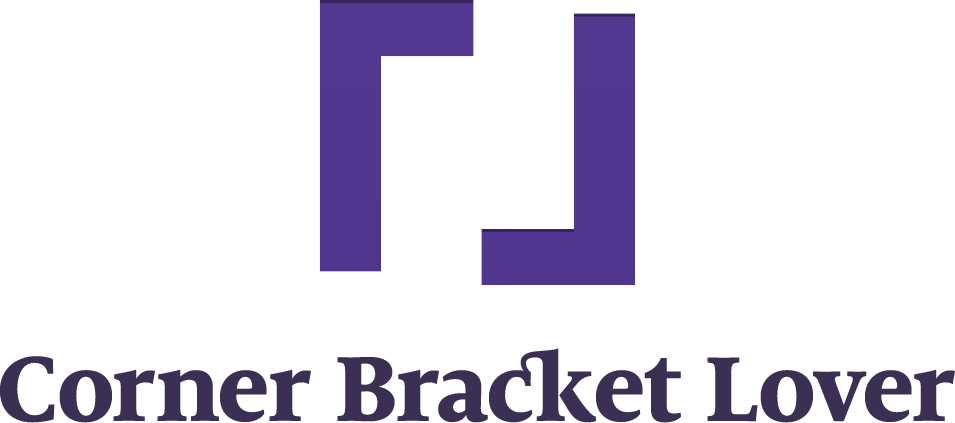
<style>
.page{position:relative;width:955px;height:423px;background:#ffffff}
.page>*{position:absolute;margin:0}
.t1{font:512.7px "HiraginoSansGB-W6";color:#53368f}
.t2{font:101.6px "MiloSerifOT-Xbold";color:#3b3053}
</style>
<div class="page">
<p class="t1" style="left:319px;top:0px;width:316px;height:285px">「」</p>
<p class="t2" style="left:0px;top:348px;width:955px;height:75px">Corner Bracket Lover</p>
</div>
